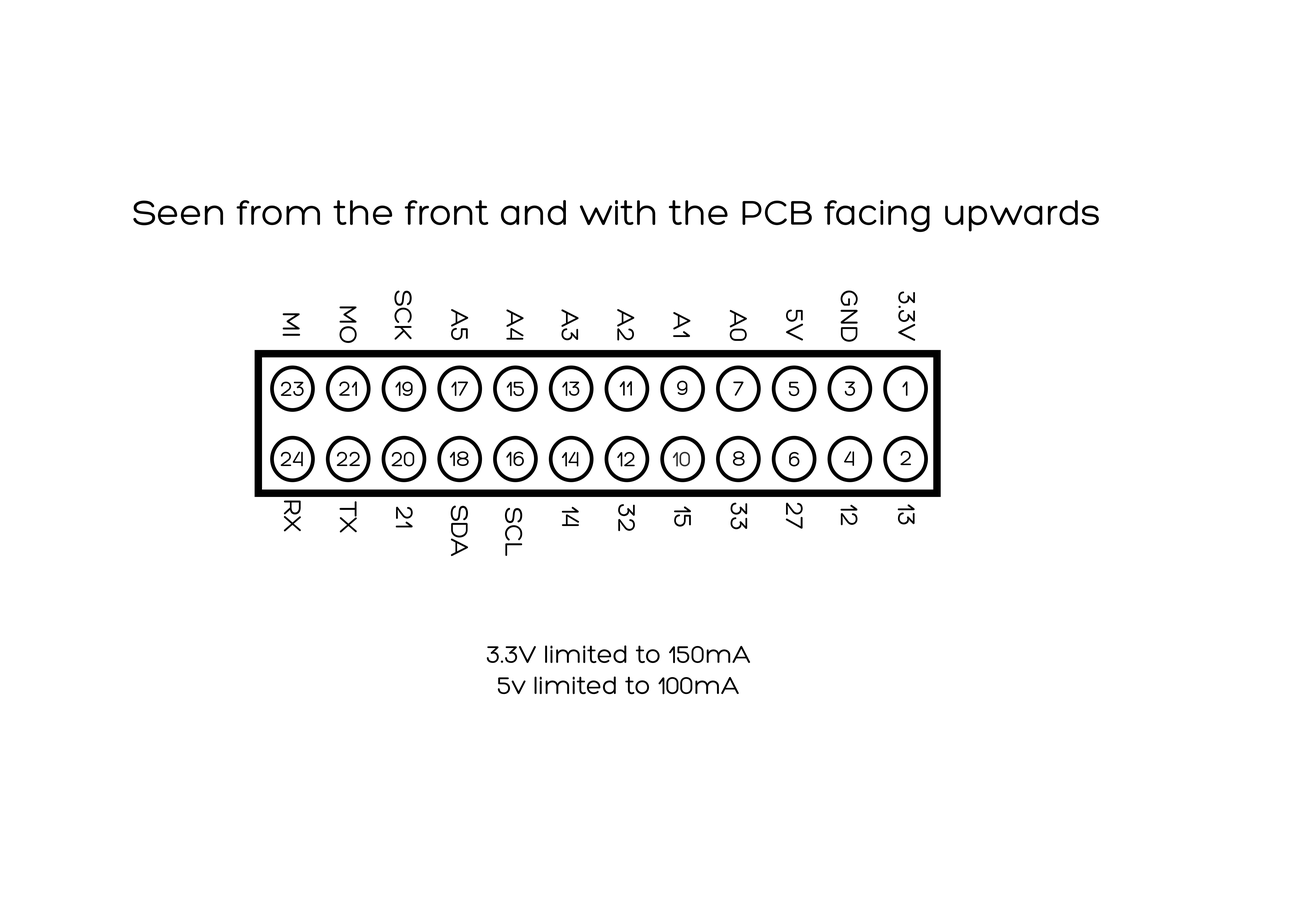
<style>
.page{position:relative;width:1299px;height:918px;background:#ffffff}
.page>*{position:absolute;margin:0}
.t1{font:37px "Hero";color:#000000}
.t2{font:25.9px "Hero";color:#000000}
.t3{font:22.2px "Hero";color:#000000}
.t4{font:22.2px "Hero";color:#333333}
</style>
<div class="page">
<p class="t1" style="left:133px;top:200px;width:966px;height:32px">Seen from the front and with the PCB facing upwards</p>
<p class="t2" style="left:394px;top:290px;width:18px;height:50px;rotate:90deg">SCK</p>
<p class="t2" style="left:840px;top:290px;width:17px;height:52px;rotate:90deg">GND</p>
<p class="t2" style="left:898px;top:292px;width:17px;height:49px;rotate:90deg">3.3V</p>
<p class="t2" style="left:282px;top:313px;width:18px;height:23px;rotate:90deg">MI</p>
<p class="t2" style="left:339px;top:306px;width:18px;height:37px;rotate:90deg">MO</p>
<p class="t2" style="left:451px;top:309px;width:17px;height:31px;rotate:90deg">A5</p>
<p class="t2" style="left:506px;top:309px;width:18px;height:31px;rotate:90deg">A4</p>
<p class="t2" style="left:561px;top:309px;width:18px;height:31px;rotate:90deg">A3</p>
<p class="t2" style="left:617px;top:309px;width:17px;height:32px;rotate:90deg">A2</p>
<p class="t2" style="left:673px;top:312px;width:17px;height:25px;rotate:90deg">A1</p>
<p class="t2" style="left:730px;top:310px;width:17px;height:31px;rotate:90deg">A0</p>
<p class="t2" style="left:786px;top:310px;width:17px;height:31px;rotate:90deg">5V</p>
<p class="t3" style="left:281px;top:382px;width:23px;height:14px">23</p>
<p class="t3" style="left:339px;top:382px;width:18px;height:14px">21</p>
<p class="t3" style="left:395px;top:382px;width:17px;height:14px">19</p>
<p class="t3" style="left:451px;top:382px;width:17px;height:14px">17</p>
<p class="t3" style="left:506px;top:382px;width:18px;height:14px">15</p>
<p class="t3" style="left:562px;top:382px;width:17px;height:14px">13</p>
<p class="t3" style="left:619px;top:381px;width:13px;height:15px">11</p>
<p class="t3" style="left:677px;top:381px;width:10px;height:14px">9</p>
<p class="t3" style="left:733px;top:382px;width:10px;height:14px">7</p>
<p class="t3" style="left:789px;top:382px;width:10px;height:14px">5</p>
<p class="t3" style="left:845px;top:382px;width:10px;height:14px">3</p>
<p class="t3" style="left:902px;top:381px;width:5px;height:15px">1</p>
<p class="t3" style="left:281px;top:452px;width:22px;height:15px">24</p>
<p class="t3" style="left:337px;top:452px;width:23px;height:14px">22</p>
<p class="t3" style="left:392px;top:452px;width:22px;height:15px">20</p>
<p class="t3" style="left:450px;top:451px;width:19px;height:15px">18</p>
<p class="t3" style="left:506px;top:452px;width:18px;height:14px">16</p>
<p class="t3" style="left:562px;top:452px;width:16px;height:15px">14</p>
<p class="t3" style="left:617px;top:452px;width:18px;height:15px">12</p>
<p class="t4" style="left:673px;top:452px;width:17px;height:15px">10</p>
<p class="t3" style="left:733px;top:451px;width:11px;height:15px">8</p>
<p class="t3" style="left:789px;top:452px;width:10px;height:15px">6</p>
<p class="t3" style="left:844px;top:451px;width:10px;height:15px">4</p>
<p class="t3" style="left:900px;top:451px;width:11px;height:14px">2</p>
<p class="t2" style="left:284px;top:501px;width:17px;height:30px;rotate:90deg">RX</p>
<p class="t2" style="left:339px;top:501px;width:18px;height:32px;rotate:90deg">TX</p>
<p class="t2" style="left:396px;top:507px;width:17px;height:21px;rotate:90deg">21</p>
<p class="t2" style="left:451px;top:506px;width:17px;height:50px;rotate:90deg">SDA</p>
<p class="t2" style="left:505px;top:508px;width:17px;height:48px;rotate:90deg">SCL</p>
<p class="t2" style="left:562px;top:507px;width:17px;height:19px;rotate:90deg">14</p>
<p class="t2" style="left:618px;top:504px;width:17px;height:27px;rotate:90deg">32</p>
<p class="t2" style="left:674px;top:506px;width:17px;height:21px;rotate:90deg">15</p>
<p class="t2" style="left:730px;top:503px;width:17px;height:26px;rotate:90deg">33</p>
<p class="t2" style="left:785px;top:503px;width:18px;height:26px;rotate:90deg">27</p>
<p class="t2" style="left:840px;top:505px;width:17px;height:20px;rotate:90deg">12</p>
<p class="t2" style="left:897px;top:504px;width:17px;height:21px;rotate:90deg">13</p>
<p class="t2" style="left:487px;top:646px;width:263px;height:48px;text-align:center">3.3V limited to 150mA<br>5v limited to 100mA</p>
</div>
